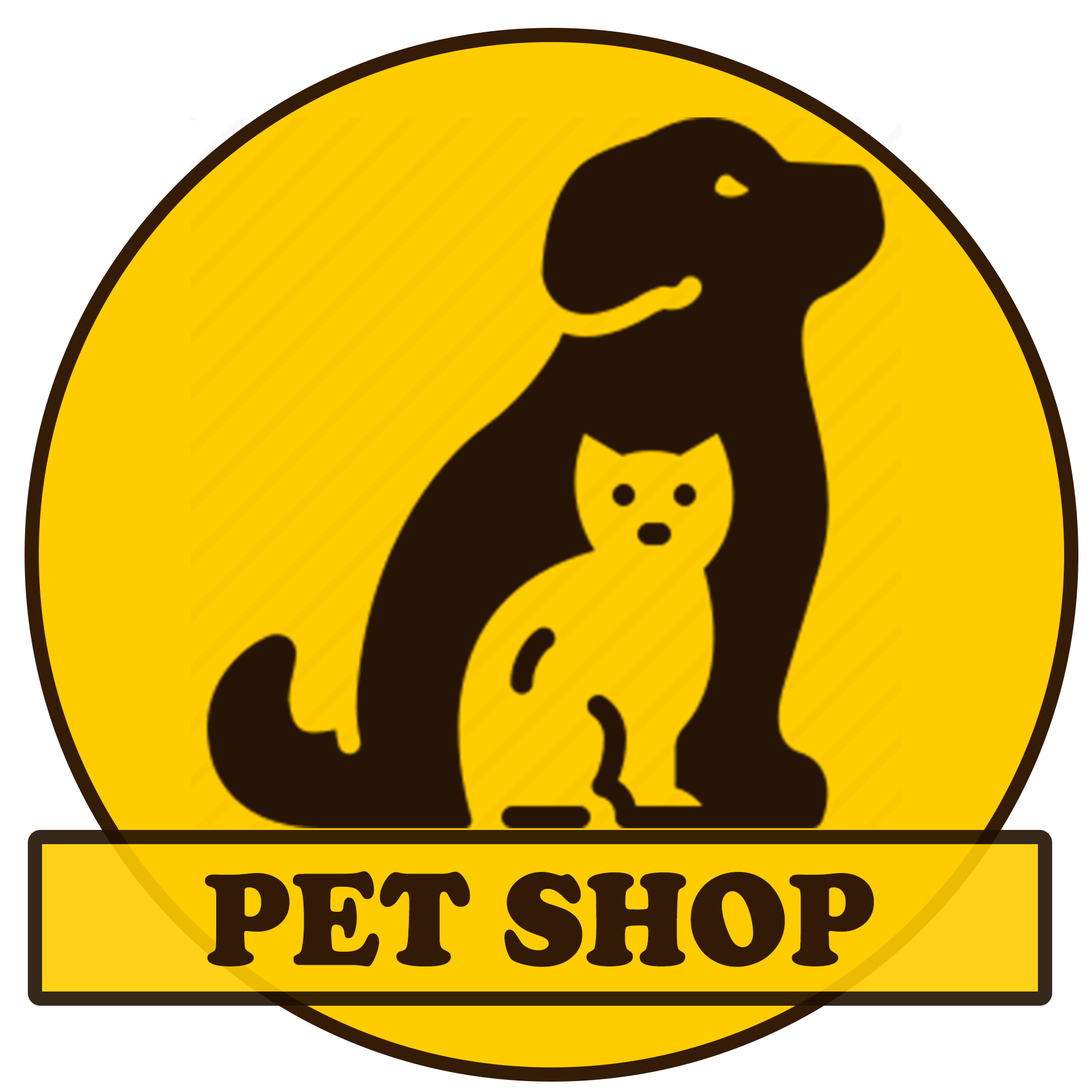
<style>
.page{position:relative;width:1092px;height:1092px;background:#ffcc00}
.page>*{position:absolute;margin:0}
.t1{font:136.8px "CooperBlack";color:#321a07;scale:0.94 1}
</style>
<div class="page">
<p class="t1" style="left:205px;top:871px;width:669px;height:96px">PET SHOP</p>
</div>
